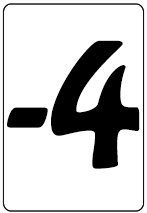
<style>
.page{position:relative;width:147px;height:213px;background:#ffffff}
.page>*{position:absolute;margin:0}
.t1{font:154.6px "HoboStd";color:#000000;scale:1.05 1}
</style>
<div class="page">
<p class="t1" style="left:6px;top:40px;width:134px;height:129px">-4</p>
</div>
